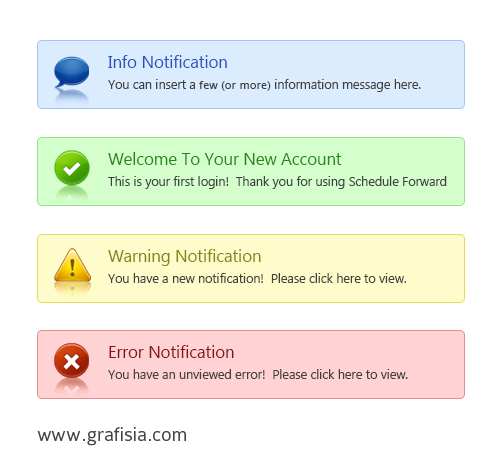
<style>
.page{position:relative;width:500px;height:476px;background:#ffffff}
.page>*{position:absolute;margin:0}
.t1{font:16.7px "SegoeUI";color:#2850c1}
.t2{font:12.5px "SegoeUI";color:#404040}
.t3{font:11px "LucidaGrande";color:#404040}
.t4{font:16.7px "SegoeUI";color:#258815}
.t5{font:16.7px "SegoeUI";color:#878314}
.t6{font:16.7px "SegoeUI";color:#871414}
</style>
<div class="page">
<p class="t1" style="left:108px;top:55px;width:119px;height:13px">Info Notification</p>
<p class="t2" style="left:108px;top:79px;width:313px;height:13px">You can insert a <span class="t3">few (or more)</span> information message here.</p>
<p class="t4" style="left:108px;top:152px;width:234px;height:13px">Welcome To Your New Account</p>
<p class="t2" style="left:108px;top:176px;width:339px;height:13px">This is your first login!  Thank you for using Schedule Forward</p>
<p class="t5" style="left:108px;top:249px;width:153px;height:17px">Warning Notification</p>
<p class="t2" style="left:108px;top:273px;width:298px;height:10px">You have a new notification!  Please click here to view.</p>
<p class="t6" style="left:109px;top:345px;width:125px;height:13px">Error Notification</p>
<p class="t2" style="left:108px;top:369px;width:300px;height:10px">You have an unviewed error!  Please click here to view.</p>
</div>
